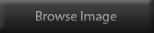
<style>
.page{position:relative;width:154px;height:33px}
.page>*{position:absolute;margin:0}
.t1{font:14px "MyriadPro-Regular";color:#8e8e8e}
</style>
<div class="page">
<p class="t1" style="left:36px;top:11px;width:81px;height:13px">Browse Image</p>
</div>
